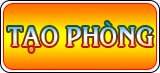
<style>
.page{position:relative;width:160px;height:73px}
.page>*{position:absolute;margin:0}
.t1{font:26px "VNI-Korin-Bold";scale:0.9 1}
</style>
<div class="page">
<p class="t1" style="left:8px;top:22px;width:145px;height:30px">TAÏO PHOØNG</p>
</div>
